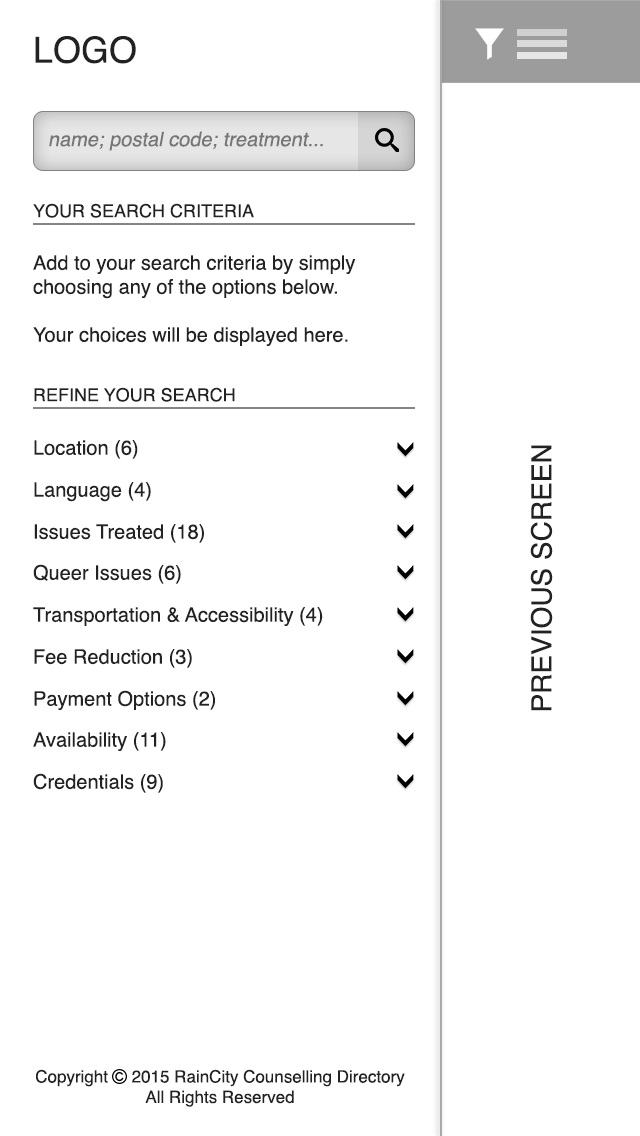
<style>
.page{position:relative;width:640px;height:1136px;background:#ffffff}
.page>*{position:absolute;margin:0}
.t1{font:36px "Helvetica";color:#222223}
.t2{font:20px "Helvetica";color:#767676;font-style:italic}
.t3{font:18px "Helvetica";color:#222223}
.t4{font:20px "Helvetica";color:#222223}
.t5{font:28px "Helvetica";color:#222223}
.t6{font:17px "Helvetica";color:#222223}
</style>
<div class="page">
<p class="t1" style="left:35px;top:36px;width:101px;height:28px">LOGO</p>
<p class="t2" style="left:49px;top:131px;width:274px;height:20px">name; postal code; treatment...</p>
<p class="t3" style="left:33px;top:203px;width:221px;height:15px">YOUR SEARCH CRITERIA</p>
<p class="t4" style="left:33px;top:255px;width:323px;height:91px">Add to your search criteria by simply choosing any of the options below.<br><br>Your choices will be displayed here.</p>
<p class="t3" style="left:34px;top:387px;width:201px;height:15px">REFINE YOUR SEARCH</p>
<p class="t4" style="left:34px;top:440px;width:104px;height:19px">Location (6)</p>
<p class="t5" style="left:530px;top:445px;width:23px;height:266px;rotate:-90deg">PREVIOUS SCREEN</p>
<p class="t4" style="left:34px;top:482px;width:117px;height:20px">Language (4)</p>
<p class="t4" style="left:34px;top:524px;width:170px;height:19px">Issues Treated (18)</p>
<p class="t4" style="left:33px;top:564px;width:148px;height:20px">Queer Issues (6)</p>
<p class="t4" style="left:33px;top:607px;width:290px;height:19px">Transportation &amp; Accessibility (4)</p>
<p class="t4" style="left:34px;top:649px;width:158px;height:19px">Fee Reduction (3)</p>
<p class="t4" style="left:34px;top:690px;width:181px;height:20px">Payment Options (2)</p>
<p class="t4" style="left:33px;top:732px;width:133px;height:19px">Availability (11)</p>
<p class="t4" style="left:33px;top:773px;width:130px;height:20px">Credentials (9)</p>
<p class="t6" style="left:36px;top:1069px;width:369px;height:38px;text-align:center">Copyright     2015 RainCity Counselling Directory<br>All Rights Reserved</p>
</div>
